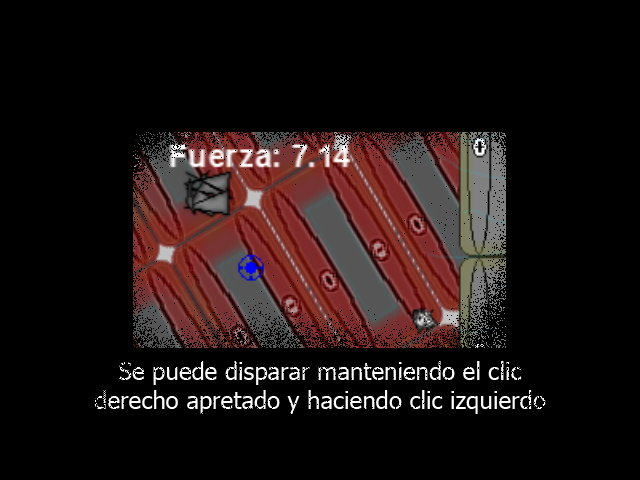
<style>
.page{position:relative;width:640px;height:480px;background:#000000}
.page>*{position:absolute;margin:0}
.t1{font:24px "Tahoma";color:#ffffff}
</style>
<div class="page">
<p class="t1" style="left:94px;top:361px;width:452px;height:53px;text-align:center">Se puede disparar manteniendo el clic<br>derecho apretado y haciendo clic izquierdo</p>
</div>
